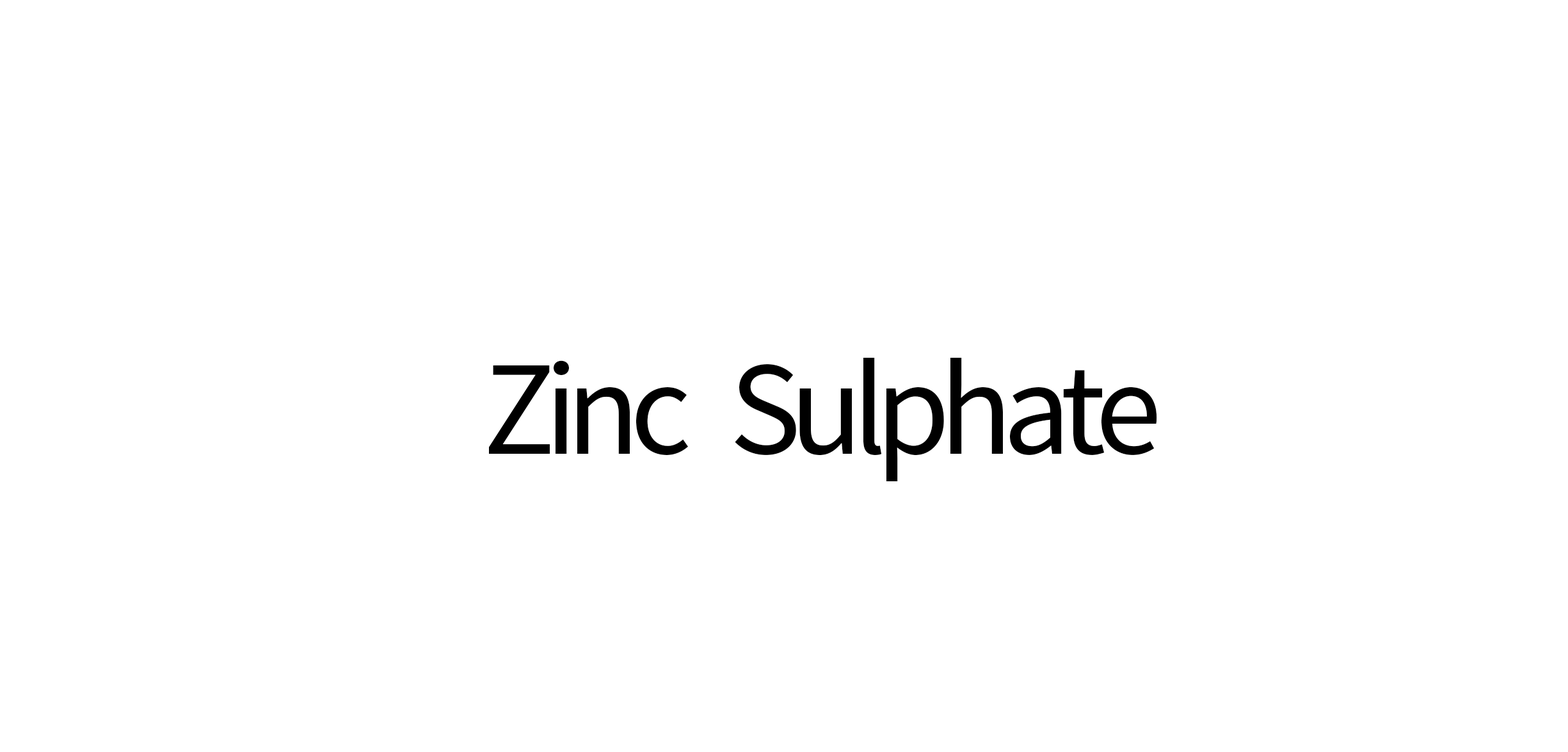
<style>
.page{position:relative;width:1568px;height:752px;background:#ffffff}
.page>*{position:absolute;margin:0}
.t1{font:134.5px "SourceSansPro-Regular";letter-spacing:-0.08em;color:#000000}
</style>
<div class="page">
<p class="t1" style="left:489px;top:358px;width:668px;height:123px">Zinc   Sulphate</p>
</div>
